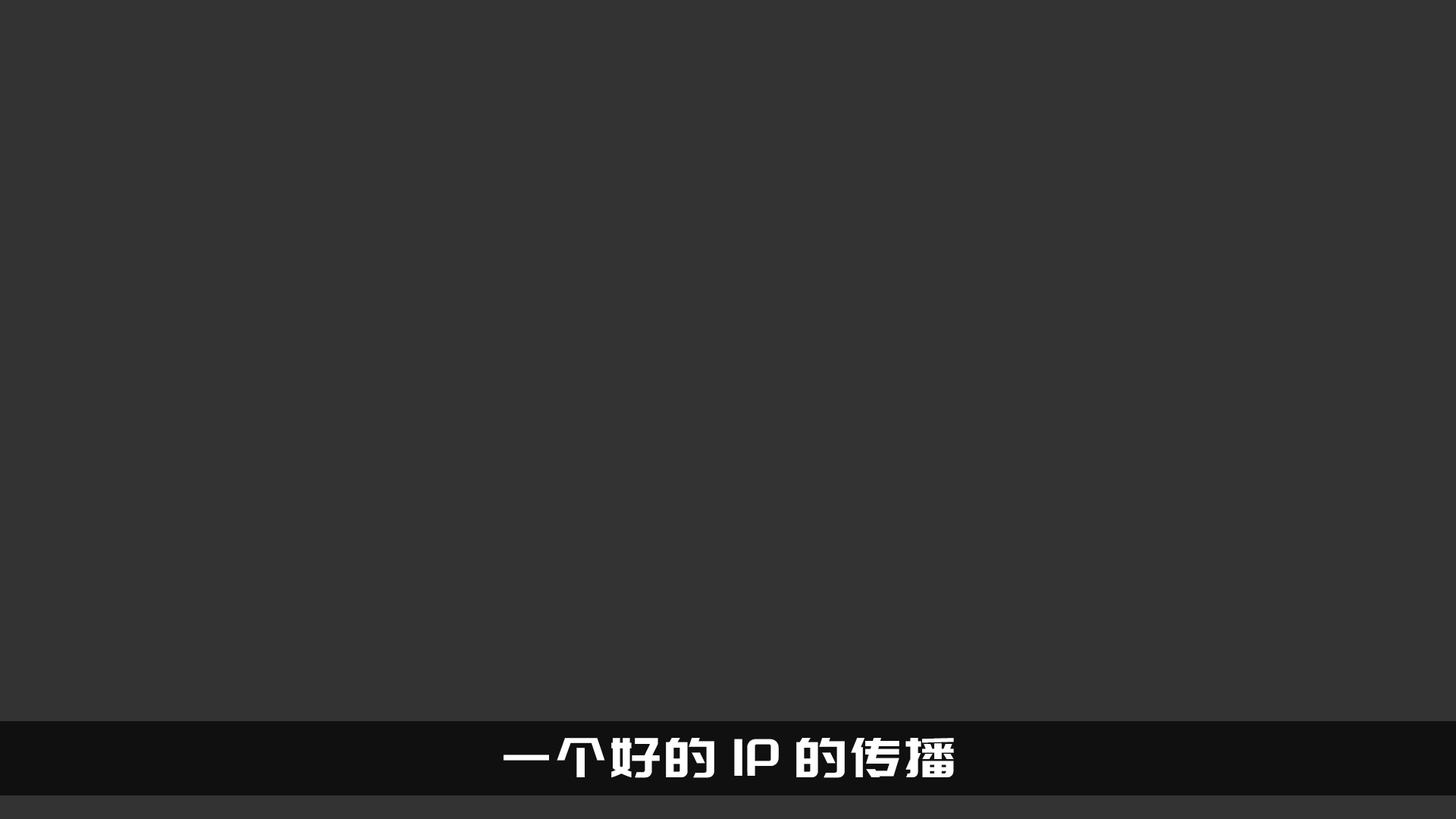
<style>
.page{position:relative;width:1456px;height:819px;background:#333333}
.page>*{position:absolute;margin:0}
.t1{font:54.6px "PangMenZhengDao-3";color:#ffffff}
</style>
<div class="page">
<p class="t1" style="left:504px;top:738px;width:450px;height:40px">一个好的IP的传播</p>
</div>
